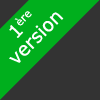
<style>
.page{position:relative;width:100px;height:100px;background:#333333}
.page>*{position:absolute;margin:0}
.t1{font:18.7px "Verdana";color:#fefefe}
.t2{font:18.8px "Verdana";color:#fefefe}
</style>
<div class="page">
<p class="t1" style="left:9px;top:11px;width:23px;height:27px;rotate:-46deg">1ère</p>
<p class="t2" style="left:9px;top:12px;width:55px;height:51px;rotate:-45deg">version</p>
</div>
